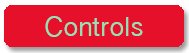
<style>
.page{position:relative;width:189px;height:53px;background:#e7102a}
.page>*{position:absolute;margin:0}
.t1{font:24px "BanglaSangamMN";color:#8ce6ba}
</style>
<div class="page">
<p class="t1" style="left:45px;top:16px;width:98px;height:21px">Controls</p>
</div>
